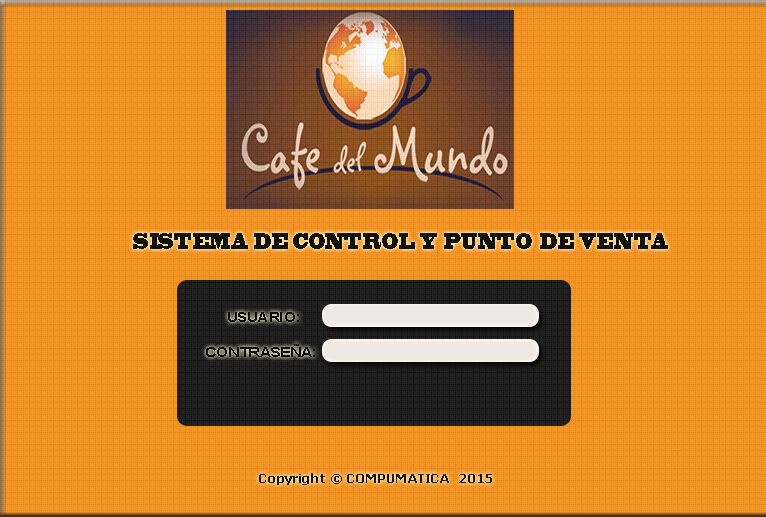
<style>
.page{position:relative;width:766px;height:517px;background:#f39427}
.page>*{position:absolute;margin:0}
.t1{font:21.8px "BlackoakStd";color:#10100f;scale:0.44 1}
.t2{font:14px "Arial-BoldMT";color:#090909;scale:1.1 1}
.t3{font:14px "Arial-BoldMT";color:#080808;scale:1.11 1}
.t4{font:12px "Tahoma-Bold";color:#131312;scale:1.1 1}
</style>
<div class="page">
<p class="t1" style="left:133px;top:233px;width:535px;height:16px">SISTEMA DE CONTROL Y PUNTO DE VENTA</p>
<p class="t2" style="left:228px;top:312px;width:71px;height:10px">USUARIO:</p>
<p class="t3" style="left:206px;top:344px;width:109px;height:13px">CONTRASEÑA:</p>
<p class="t4" style="left:259px;top:473px;width:233px;height:12px">Copyright © COMPUMATICA  2015</p>
</div>
